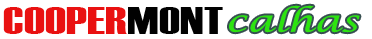
<style>
.page{position:relative;width:372px;height:39px;background:#ffffff}
.page>*{position:absolute;margin:0}
.t1{font:30px "LucidaCalligraphy-Italic";color:#2de40f;scale:1.33 1}
.t2{font:38.1px "Haettenschweiler";color:#e91111;scale:1.46 1}
.t3{font:38.1px "Haettenschweiler";color:#010101;scale:1.46 1}
</style>
<div class="page">
<p class="t1" style="left:229px;top:5px;width:131px;height:28px">calhas</p>
<p class="t2" style="left:3px;top:7px;width:220px;height:27px">COOPER<span class="t3">MONT</span></p>
</div>
